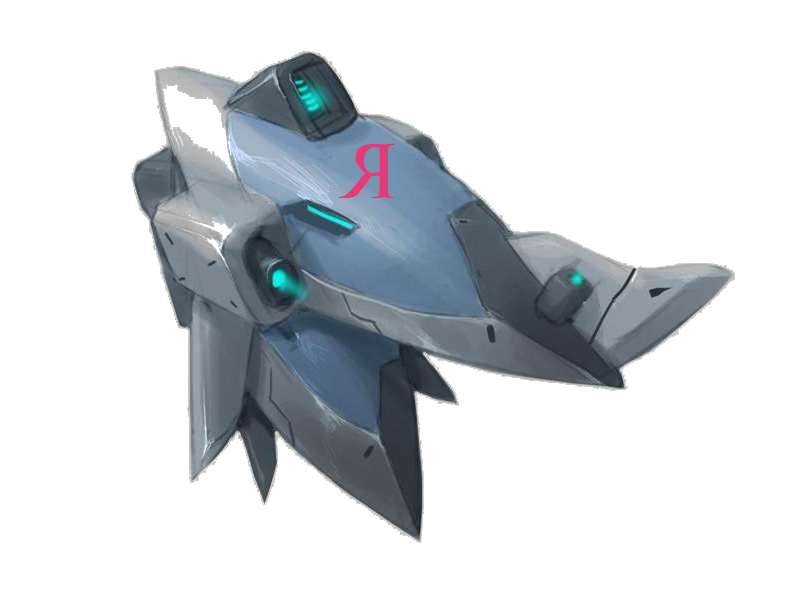
<style>
.page{position:relative;width:800px;height:600px;background:#ffffff}
.page>*{position:absolute;margin:0}
.t1{font:72px "TrajanPro-Bold";color:#e63978}
</style>
<div class="page">
<p class="t1" style="left:338px;top:144px;width:58px;height:54px;rotate:180deg">R</p>
</div>
